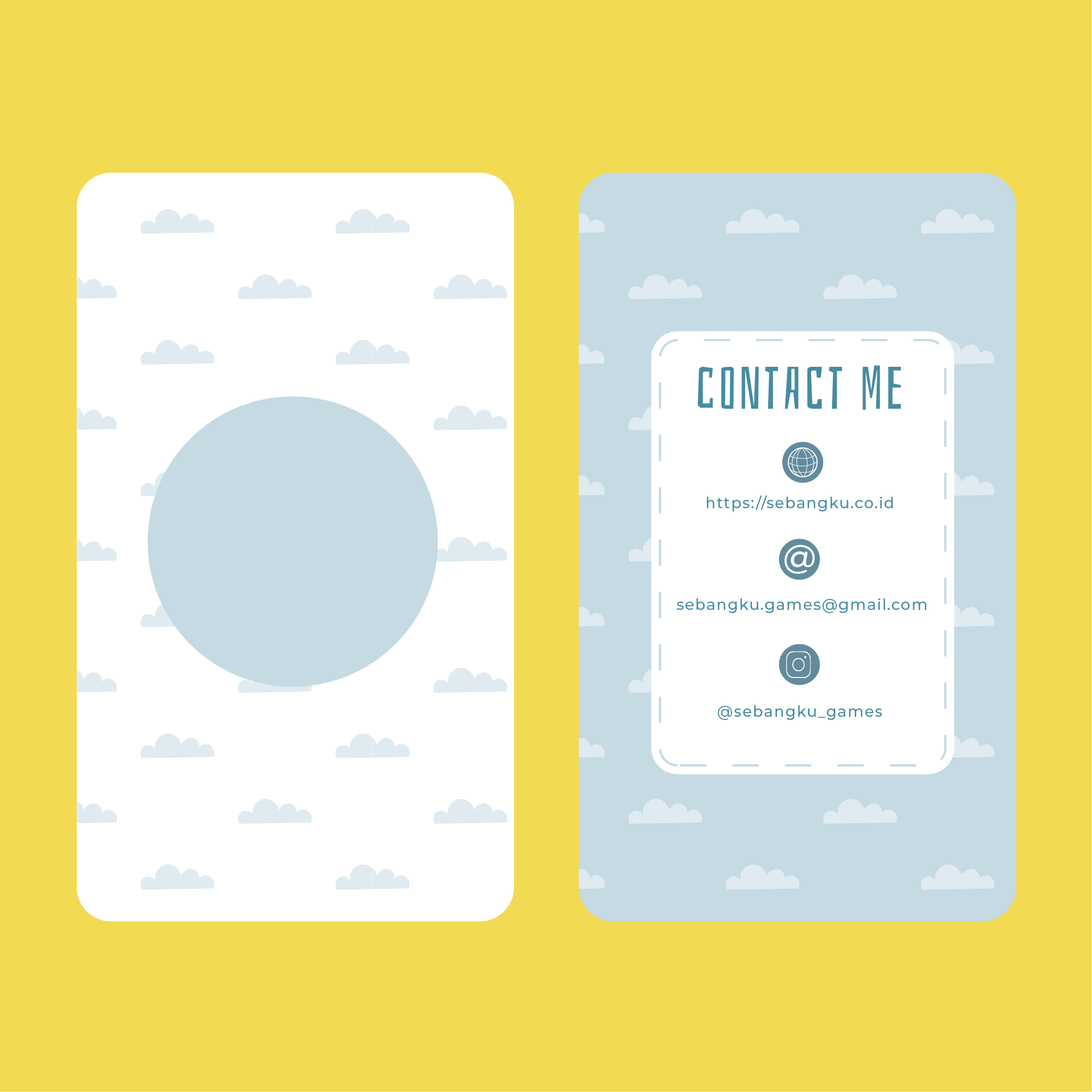
<style>
.page{position:relative;width:1092px;height:1092px;background:#f2da52}
.page>*{position:absolute;margin:0}
.t1{font:58.9px "Bahiana-Regular";letter-spacing:0.057em;color:#468ca0}
.t2{font:15.3px "Montserrat-Medium";letter-spacing:0.057em;color:#468ca0}
</style>
<div class="page">
<p class="t1" style="left:697px;top:365px;width:204px;height:45px">contact me</p>
<p class="t2" style="left:707px;top:495px;width:186px;height:16px">https://sebangku.co.id</p>
<p class="t2" style="left:676px;top:598px;width:250px;height:15px">sebangku.games@gmail.com</p>
<p class="t2" style="left:717px;top:705px;width:165px;height:15px">@sebangku_games</p>
</div>
